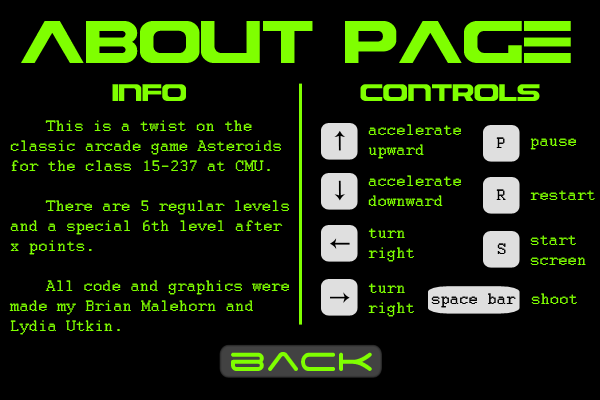
<style>
.page{position:relative;width:600px;height:400px;background:#000000}
.page>*{position:absolute;margin:0}
.t1{font:50px "Astera";color:#7fff00}
.t2{font:20.1px "Astera";color:#7fff00}
.t3{font:16.7px "Courier";color:#7fff00}
.t4{font:16.7px "Courier";color:#000000}
.t5{font:41.7px "SpaceAge";color:#7fff00}
</style>
<div class="page">
<p class="t1" style="left:21px;top:21px;width:550px;height:42px">About page</p>
<p class="t2" style="left:112px;top:84px;width:74px;height:17px">info</p>
<p class="t2" style="left:360px;top:84px;width:180px;height:17px">Controls</p>
<p class="t3" style="left:9px;top:120px;width:280px;height:215px">This is a twist on the<br>classic arcade game Asteroids<br>for the class 15-237 at CMU.<br><br> There are 5 regular levels<br>and a special 6th level after<br>x points.<br><br> All code and graphics were<br>made my Brian Malehorn and<br>Lydia Utkin.</p>
<p class="t3" style="left:368px;top:124px;width:93px;height:35px">accelerate<br>upward</p>
<p class="t4" style="left:496px;top:137px;width:9px;height:11px">P</p>
<p class="t3" style="left:530px;top:138px;width:46px;height:12px">pause</p>
<p class="t3" style="left:368px;top:175px;width:93px;height:31px">accelerate<br>downward</p>
<p class="t4" style="left:496px;top:189px;width:10px;height:11px">R</p>
<p class="t3" style="left:530px;top:190px;width:65px;height:10px">restart</p>
<p class="t3" style="left:368px;top:228px;width:46px;height:34px">turn<br>right</p>
<p class="t4" style="left:497px;top:243px;width:9px;height:11px">S</p>
<p class="t3" style="left:530px;top:235px;width:56px;height:30px">start<br>screen</p>
<p class="t3" style="left:368px;top:283px;width:46px;height:34px">turn<br>right</p>
<p class="t4" style="left:431px;top:293px;width:85px;height:15px">space bar</p>
<p class="t3" style="left:531px;top:293px;width:46px;height:11px">shoot</p>
<p class="t5" style="left:231px;top:352px;width:141px;height:19px">back</p>
</div>
